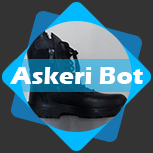
<style>
.page{position:relative;width:153px;height:153px;background:#333333}
.page>*{position:absolute;margin:0}
.t1{font:25px "ErasITC-Bold";color:#ffffff}
</style>
<div class="page">
<p class="t1" style="left:10px;top:67px;width:133px;height:17px">Askeri Bot</p>
</div>
